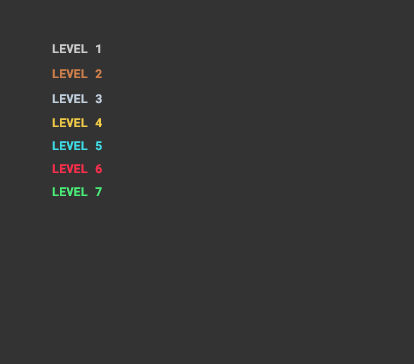
<style>
.page{position:relative;width:414px;height:364px;background:#333333}
.page>*{position:absolute;margin:0}
.t1{font:12px "RobotoMono-Bold";color:#cbcbcb}
.t2{font:12px "RobotoMono-Bold";color:#cf7f4a}
.t3{font:12px "RobotoMono-Bold";color:#c2d0de}
.t4{font:12px "RobotoMono-Bold";color:#efca48}
.t5{font:12px "RobotoMono-Bold";color:#3fdbe5}
.t6{font:12px "RobotoMono-Bold";color:#fe2f4c}
.t7{font:12px "RobotoMono-Bold";color:#4aec78}
</style>
<div class="page">
<p class="t1" style="left:52px;top:44px;width:49px;height:9px">LEVEL 1</p>
<p class="t2" style="left:52px;top:69px;width:50px;height:9px">LEVEL 2</p>
<p class="t3" style="left:52px;top:94px;width:50px;height:10px">LEVEL 3</p>
<p class="t4" style="left:52px;top:118px;width:50px;height:9px">LEVEL 4</p>
<p class="t5" style="left:52px;top:141px;width:50px;height:10px">LEVEL 5</p>
<p class="t6" style="left:52px;top:164px;width:50px;height:10px">LEVEL 6</p>
<p class="t7" style="left:52px;top:187px;width:50px;height:9px">LEVEL 7</p>
</div>
